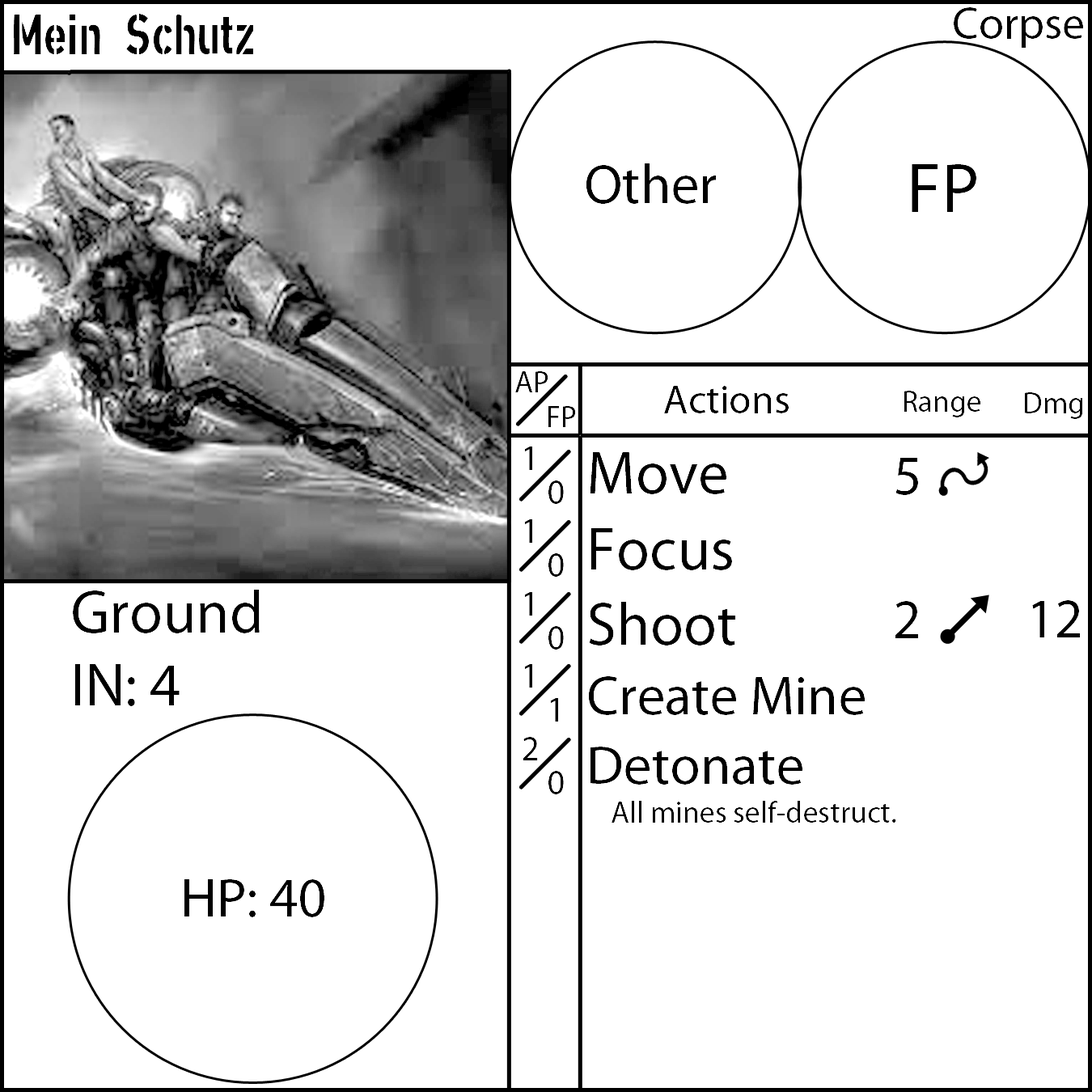
<style>
.page{position:relative;width:1092px;height:1092px;background:#ffffff}
.page>*{position:absolute;margin:0}
.t1{font:55.6px "XXIISTRAIGHT-ARMY";color:#000000}
.t2{font:55.6px "MyriadPro-Regular";color:#000000}
.t3{font:70.8px "MyriadPro-Regular";color:#000000}
.t4{font:30.3px "MyriadPro-Regular";color:#000000}
.t5{font:40.4px "MyriadPro-Regular";color:#000000}
.t6{font:35.4px "MyriadPro-Regular";color:#000000}
.t7{font:60.7px "MyriadPro-Regular";color:#000000}
</style>
<div class="page">
<p class="t1" style="left:14px;top:14px;width:240px;height:40px">Mein Schutz</p>
<p class="t2" style="left:586px;top:163px;width:131px;height:41px">Other</p>
<p class="t3" style="left:912px;top:164px;width:64px;height:48px">FP</p>
<p class="t4" style="left:515px;top:371px;width:33px;height:21px">AP</p>
<p class="t5" style="left:664px;top:386px;width:125px;height:27px">Actions</p>
<p class="t4" style="left:904px;top:391px;width:77px;height:26px">Range</p>
<p class="t4" style="left:1024px;top:392px;width:59px;height:27px">Dmg</p>
<p class="t4" style="left:548px;top:406px;width:28px;height:21px">FP</p>
<p class="t6" style="left:523px;top:447px;width:15px;height:313px">1<br>1<br>1<br>1<br>2</p>
<p class="t4" style="left:588px;top:452px;width:308px;height:371px"><span class="t7">Move<br>Focus<br>Shoot<br></span><span class="t2">Create Mine<br>Detonate<br></span> All mines self-destruct.</p>
<p class="t2" style="left:895px;top:458px;width:23px;height:180px;text-align:center">5<br><br>2</p>
<p class="t6" style="left:548px;top:480px;width:16px;height:314px">0<br>0<br>0<br>1<br>0</p>
<p class="t7" style="left:73px;top:590px;width:187px;height:116px">Ground<br>IN: 4</p>
<p class="t2" style="left:1032px;top:600px;width:48px;height:37px">12</p>
<p class="t2" style="left:184px;top:879px;width:140px;height:38px">HP: 40</p>
</div>
